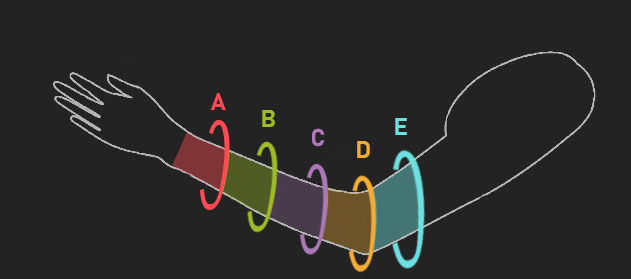
<style>
.page{position:relative;width:631px;height:279px;background:#242323}
.page>*{position:absolute;margin:0}
.t1{font:24px "Bahnschrift-Bold";color:#fe4b53}
.t2{font:24px "Bahnschrift-Bold";color:#9dbc26}
.t3{font:24px "Bahnschrift-Bold";color:#6de1e2}
.t4{font:24px "Bahnschrift-Bold";color:#aa79b6}
.t5{font:24px "Bahnschrift-Bold";color:#f5ad34}
</style>
<div class="page">
<p class="t1" style="left:210px;top:93px;width:16px;height:17px">A</p>
<p class="t2" style="left:262px;top:110px;width:13px;height:17px">B</p>
<p class="t3" style="left:395px;top:118px;width:12px;height:17px">E</p>
<p class="t4" style="left:312px;top:128px;width:13px;height:19px">C</p>
<p class="t5" style="left:357px;top:141px;width:13px;height:17px">D</p>
</div>
